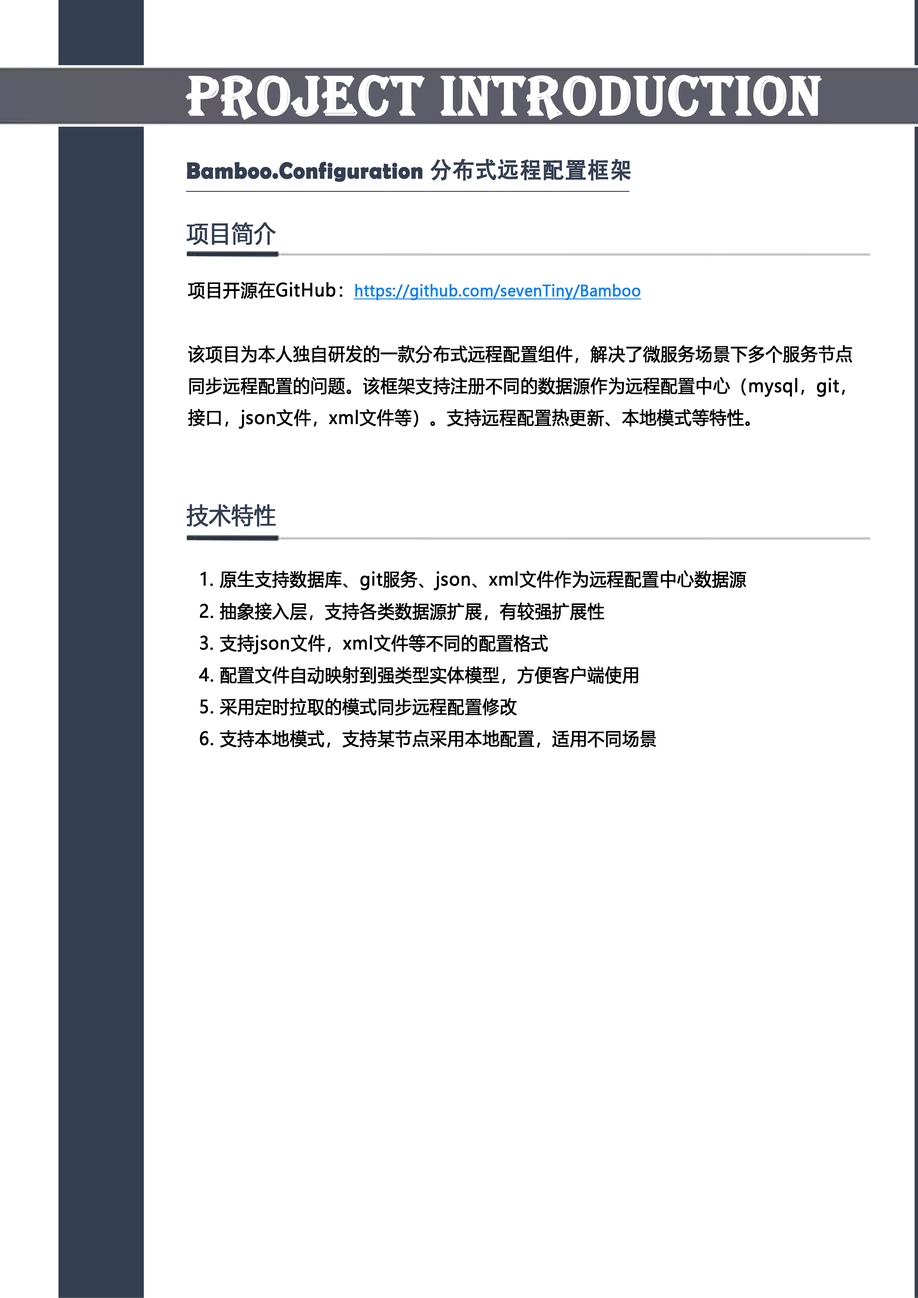
<style>
.page{position:relative;width:918px;height:1298px;background:#ffffff}
.page>*{position:absolute;margin:0}
.t1{font:57.4px "Algerian";letter-spacing:0.005em;color:#ffffff;font-weight:bold;scale:0.95 1}
.t2{font:23px "BerlinSansFBDemi-Bold";letter-spacing:0.005em;color:#333e50;font-weight:bold;scale:0.95 1}
.t3{font:23px "AdobeHeitiStd-Regular";letter-spacing:0.005em;color:#333e50;font-weight:bold;scale:0.95 1}
.t4{font:23px "MicrosoftYaHei";letter-spacing:0.005em;color:#333e50;font-weight:bold;scale:0.95 1}
.t5{font:17.9px/31.9px "MicrosoftYaHei";letter-spacing:0.005em;color:#000000;font-weight:bold;scale:0.95 1}
.t6{font:15.3px/28.1px "MicrosoftYaHei";letter-spacing:0.005em;color:#087ff9;font-weight:bold;text-decoration:underline;scale:0.95 1}
</style>
<div class="page">
<p class="t1" style="left:185px;top:75px;width:637px;height:45px">PROJECT INTRODUCTION</p>
<p class="t2" style="left:187px;top:159px;width:444px;height:23px">Bamboo.Configuration <span class="t3">分布式远程配置框架</span></p>
<p class="t4" style="left:186px;top:223px;width:90px;height:22px">项目简介</p>
<p class="t5" style="left:188px;top:282px;width:665px;height:147px">项目开源在GitHub：<span class="t6">https://github.com/sevenTiny/Bamboo<br></span><br>该项目为本人独自研发的一款分布式远程配置组件，解决了微服务场景下多个服务节点同步远程配置的问题。该框架支持注册不同的数据源作为远程配置中心（mysql，git，接口，json文件，xml文件等）。支持远程配置热更新、本地模式等特性。</p>
<p class="t4" style="left:186px;top:504px;width:90px;height:23px">技术特性</p>
<p class="t5" style="left:199px;top:571px;width:548px;height:177px">1. 原生支持数据库、git服务、json、xml文件作为远程配置中心数据源<br>  2. 抽象接入层，支持各类数据源扩展，有较强扩展性<br> 3. 支持json文件，xml文件等不同的配置格式<br>  4. 配置文件自动映射到强类型实体模型，方便客户端使用<br>  5. 采用定时拉取的模式同步远程配置修改<br>  6. 支持本地模式，支持某节点采用本地配置，适用不同场景</p>
</div>
